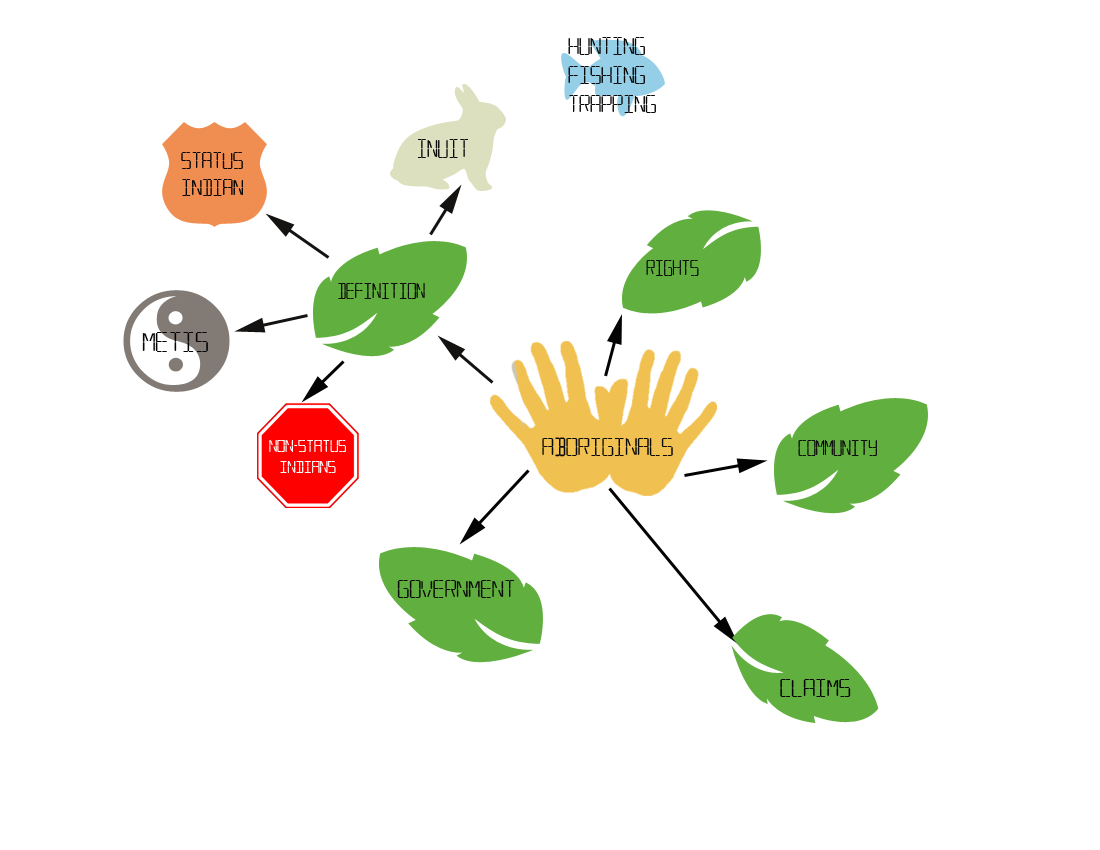
<style>
.page{position:relative;width:1100px;height:850px;background:#ffffff}
.page>*{position:absolute;margin:0}
.t1{font:24.2px "TransponderAOE";color:#060606;scale:0.96 1}
.t2{font:25.9px "TransponderAOE";color:#090909;scale:0.86 1}
.t3{font:23.1px "TransponderAOE";color:#030303;scale:0.95 1}
.t4{font:22.5px "TransponderAOE";color:#090909;scale:0.83 1}
.t5{font:27.8px "TransponderAOE";color:#030303}
.t6{font:25.6px "TransponderAOE";color:#090909}
.t7{font:17.5px "TransponderAOE";color:#fefefe;scale:0.97 1}
.t8{font:25px "TransponderAOE";color:#090909}
.t9{font:25px "TransponderAOE";color:#000000}
</style>
<div class="page">
<p class="t1" style="left:568px;top:37px;width:88px;height:76px">Hunting<br>Fishing<br>Trapping</p>
<p class="t2" style="left:418px;top:139px;width:50px;height:19px">Inuit</p>
<p class="t3" style="left:181px;top:152px;width:62px;height:44px">Status<br>Indian</p>
<p class="t4" style="left:646px;top:260px;width:53px;height:16px">Rights</p>
<p class="t4" style="left:338px;top:283px;width:87px;height:16px">Definition</p>
<p class="t5" style="left:142px;top:332px;width:66px;height:20px">Metis</p>
<p class="t6" style="left:542px;top:437px;width:131px;height:20px">Aboriginals</p>
<p class="t7" style="left:269px;top:440px;width:77px;height:33px;text-align:center">non-status<br>indIans</p>
<p class="t4" style="left:798px;top:440px;width:79px;height:16px">community</p>
<p class="t8" style="left:397px;top:580px;width:118px;height:18px">government</p>
<p class="t9" style="left:780px;top:679px;width:71px;height:18px">claims</p>
</div>
